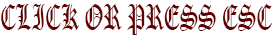
<style>
.page{position:relative;width:272px;height:38px;background:#ffffff}
.page>*{position:absolute;margin:0}
.t1{font:35.2px "OldEnglishTextMT";color:#630000;scale:0.62 1}
</style>
<div class="page">
<p class="t1" style="left:1px;top:4px;width:271px;height:31px">CLICK OR PRESS ESC</p>
</div>
